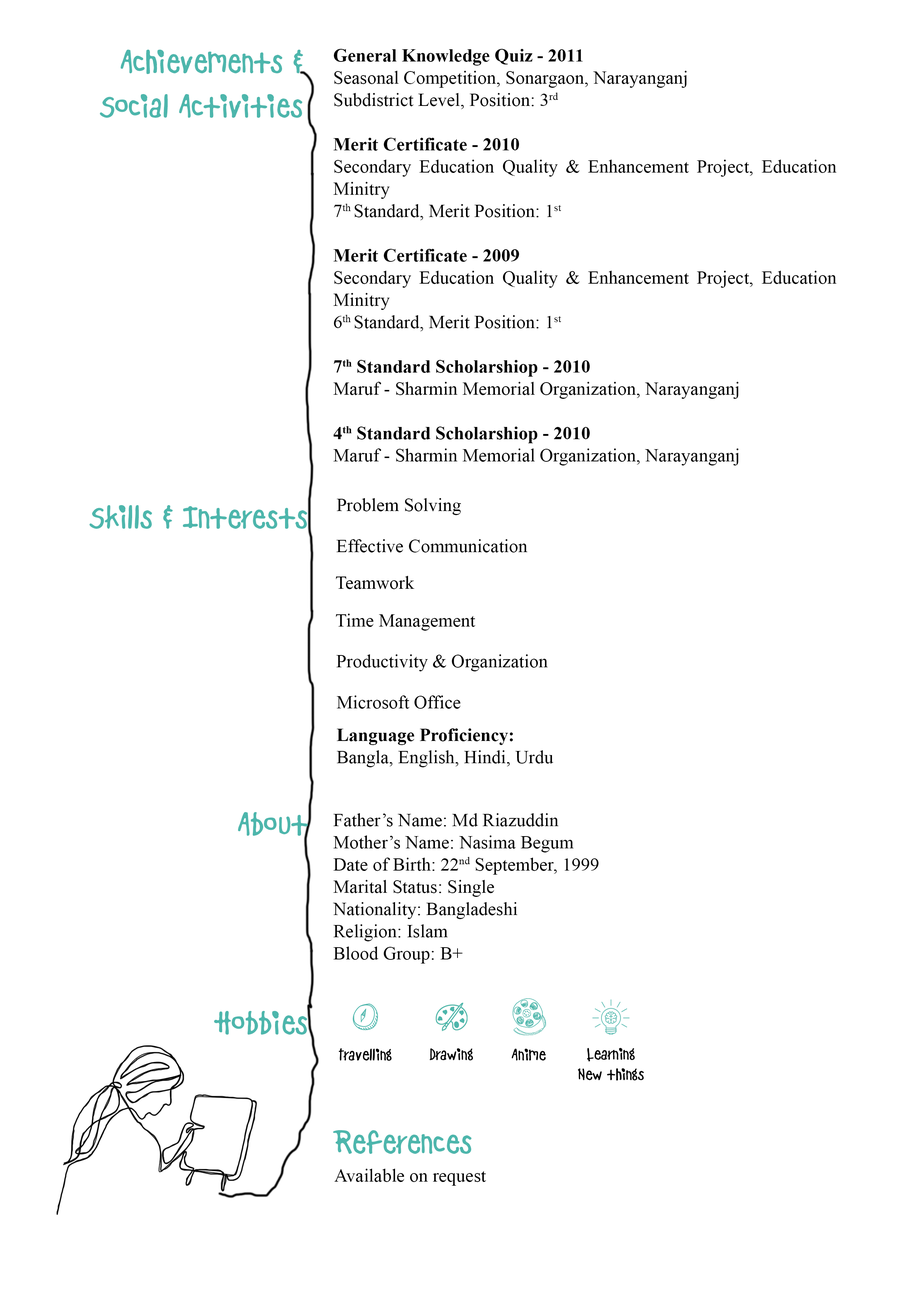
<style>
.page{position:relative;width:918px;height:1299px;background:#ffffff}
.page>*{position:absolute;margin:0}
.t1{font:37px "BadDog";color:#4db6ac}
.t2{font:18.5px "TimesNewRomanPSMT";color:#000000}
.t3{font:18.5px "TimesNewRomanPS-BoldMT";color:#000000}
.t4{font:18.5px "BadDog";color:#000000}
.t5{font:18.5px/20.1px "BadDog";color:#000000}
</style>
<div class="page">
<p class="t1" style="left:100px;top:50px;width:203px;height:68px;text-align:right">Achievements &amp;<br>Social Activities</p>
<p class="t2" style="left:333px;top:49px;width:504px;height:416px;text-align:justify"><span class="t3">General Knowledge Quiz - 2011<br></span>Seasonal Competition, Sonargaon, Narayanganj<br>Subdistrict Level, Position: 3rd<br><br><span class="t3">Merit Certificate - 2010<br></span>Secondary Education Quality &amp; Enhancement Project, Education Minitry<br>7th Standard, Merit Position: 1st<br><br><span class="t3">Merit Certificate - 2009<br></span>Secondary Education Quality &amp; Enhancement Project, Education Minitry<br>6th Standard, Merit Position: 1st<br><br><span class="t3">7th Standard Scholarshiop - 2010<br></span>Maruf - Sharmin Memorial Organization, Narayanganj<br><br><span class="t3">4th Standard Scholarshiop - 2010<br></span>Maruf - Sharmin Memorial Organization, Narayanganj</p>
<p class="t2" style="left:337px;top:498px;width:124px;height:17px">Problem Solving</p>
<p class="t1" style="left:89px;top:505px;width:218px;height:24px">Skills &amp; Interests</p>
<p class="t2" style="left:337px;top:539px;width:191px;height:13px">Effective Communication</p>
<p class="t2" style="left:336px;top:576px;width:79px;height:13px">Teamwork</p>
<p class="t2" style="left:336px;top:613px;width:139px;height:17px">Time Management</p>
<p class="t2" style="left:336px;top:654px;width:212px;height:17px">Productivity &amp; Organization</p>
<p class="t2" style="left:337px;top:695px;width:124px;height:14px">Microsoft Office</p>
<p class="t2" style="left:337px;top:728px;width:216px;height:39px;text-align:justify"><span class="t3">Language Proficiency:<br></span>Bangla, English, Hindi, Urdu</p>
<p class="t1" style="left:238px;top:812px;width:70px;height:24px">About</p>
<p class="t2" style="left:333px;top:813px;width:266px;height:150px;text-align:justify">Father’s Name: Md Riazuddin<br>Mother’s Name: Nasima Begum<br>Date of Birth: 22nd September, 1999<br>Marital Status: Single<br>Nationality: Bangladeshi<br>Religion: Islam<br>Blood Group: B+</p>
<p class="t1" style="left:214px;top:1011px;width:93px;height:23px">Hobbies</p>
<p class="t4" style="left:339px;top:1048px;width:53px;height:13px">Travelling</p>
<p class="t4" style="left:429px;top:1048px;width:44px;height:12px">Drawing</p>
<p class="t4" style="left:512px;top:1048px;width:34px;height:12px">Anime</p>
<p class="t5" style="left:578px;top:1048px;width:66px;height:32px;text-align:center">Learning<br>New things</p>
<p class="t1" style="left:333px;top:1130px;width:139px;height:24px">References</p>
<p class="t2" style="left:334px;top:1168px;width:152px;height:17px">Available on request</p>
</div>
